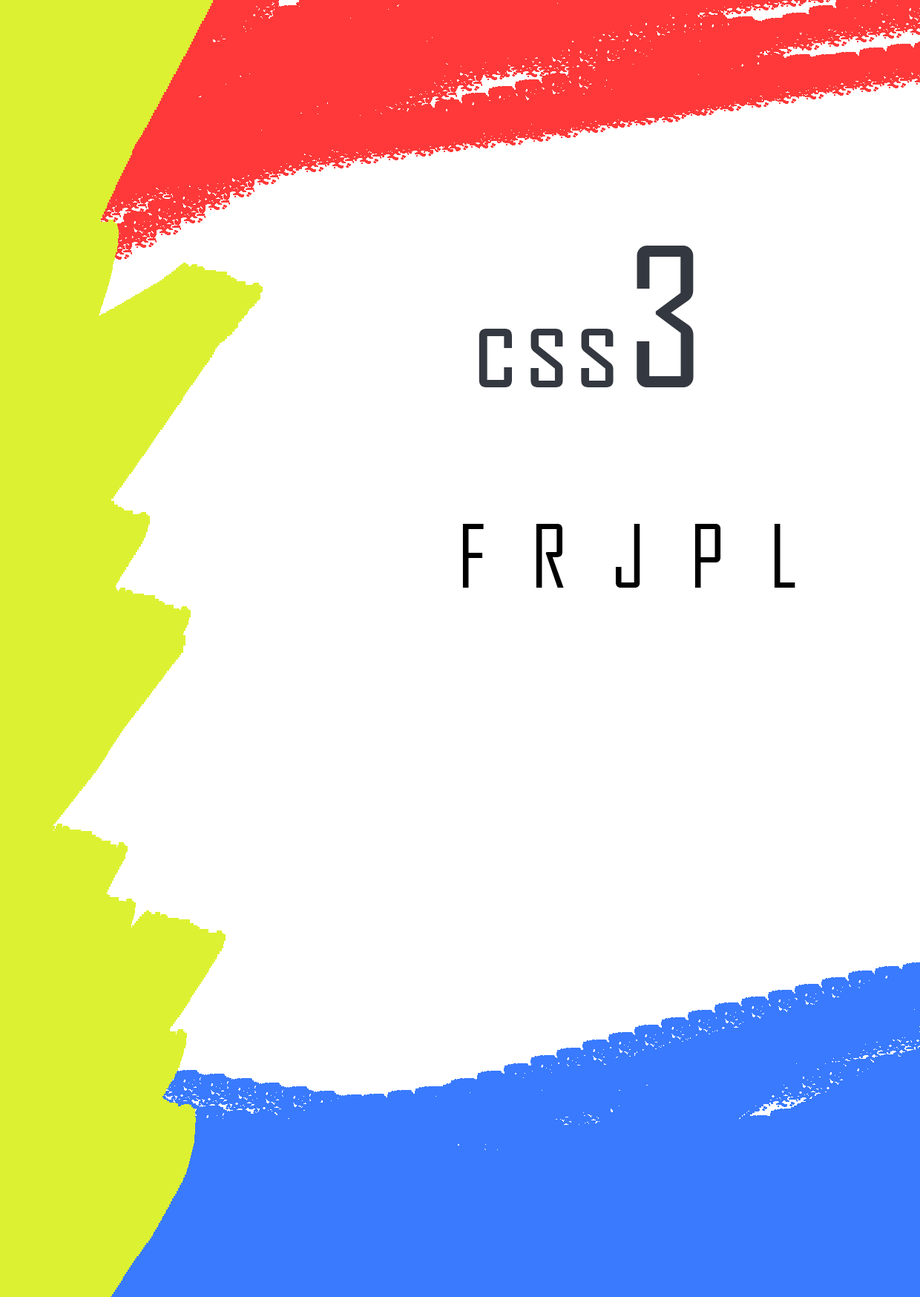
<style>
.page{position:relative;width:920px;height:1297px;background:#ffffff}
.page>*{position:absolute;margin:0}
.t1{font:123.6px "AgencyFB-Reg";letter-spacing:0.05em;color:#343840}
.t2{font:185.4px "AgencyFB-Reg";letter-spacing:0.05em;color:#343840}
.t3{font:83.4px "AgencyFB-Reg";letter-spacing:0.05em;color:#000000}
</style>
<div class="page">
<p class="t1" style="left:478px;top:246px;width:216px;height:141px">css<span class="t2">3</span></p>
<p class="t3" style="left:462px;top:524px;width:333px;height:63px">F  R  J  P  L</p>
</div>
